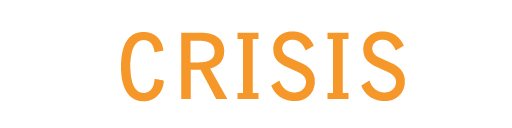
<style>
.page{position:relative;width:512px;height:128px;background:#ffffff}
.page>*{position:absolute;margin:0}
.t1{font:90px "BellGothicStd-Bold";color:#f59829}
</style>
<div class="page">
<p class="t1" style="left:121px;top:31px;width:284px;height:71px">CRISIS</p>
</div>
